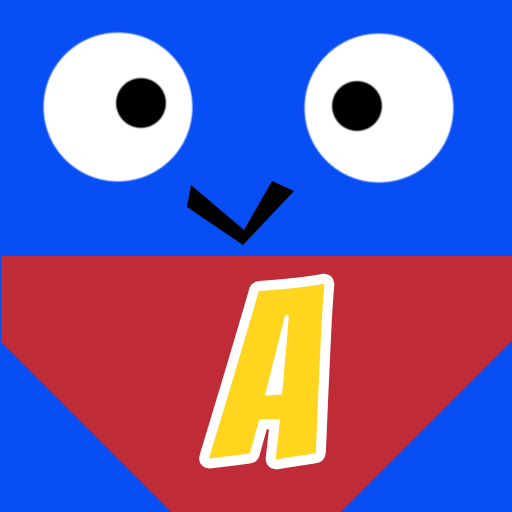
<style>
.page{position:relative;width:512px;height:512px;background:#074ef4}
.page>*{position:absolute;margin:0}
.t1{font:238px "Bangers-Regular";color:#ffd51e}
</style>
<div class="page">
<p class="t1" style="left:208px;top:283px;width:117px;height:177px">A</p>
</div>
